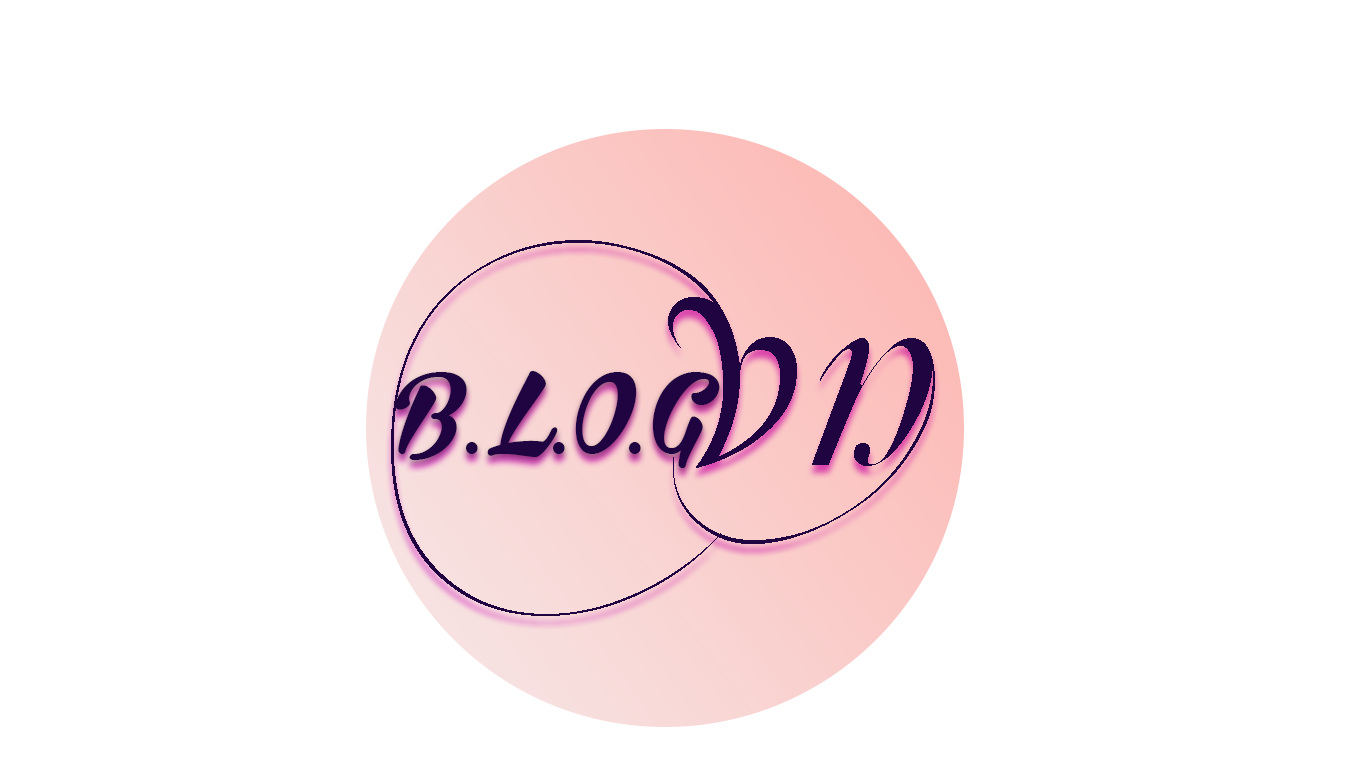
<style>
.page{position:relative;width:1366px;height:768px;background:#ffffff}
.page>*{position:absolute;margin:0}
.t1{font:300px "SVN-Mutlu";color:#200341}
.t2{font:100px "SVN-Bira";color:#200441}
</style>
<div class="page">
<p class="t1" style="left:391px;top:240px;width:544px;height:376px">vn</p>
<p class="t2" style="left:395px;top:371px;width:325px;height:97px">B.L.O.G</p>
</div>
